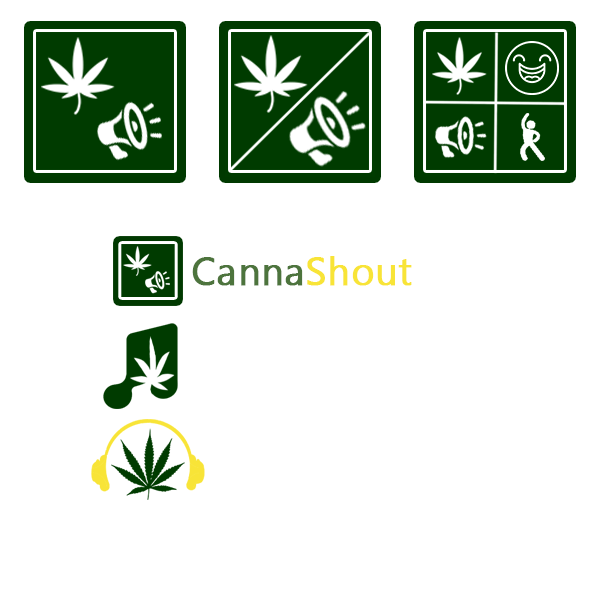
<style>
.page{position:relative;width:600px;height:600px;background:#ffffff}
.page>*{position:absolute;margin:0}
.t1{font:39.4px "MicrosoftTaiLe";color:#4d743d;font-weight:bold}
.t2{font:39.4px "MicrosoftTaiLe";color:#f8e437;font-weight:bold}
</style>
<div class="page">
<p class="t1" style="left:192px;top:256px;width:220px;height:30px">Canna<span class="t2">Shout</span></p>
</div>
